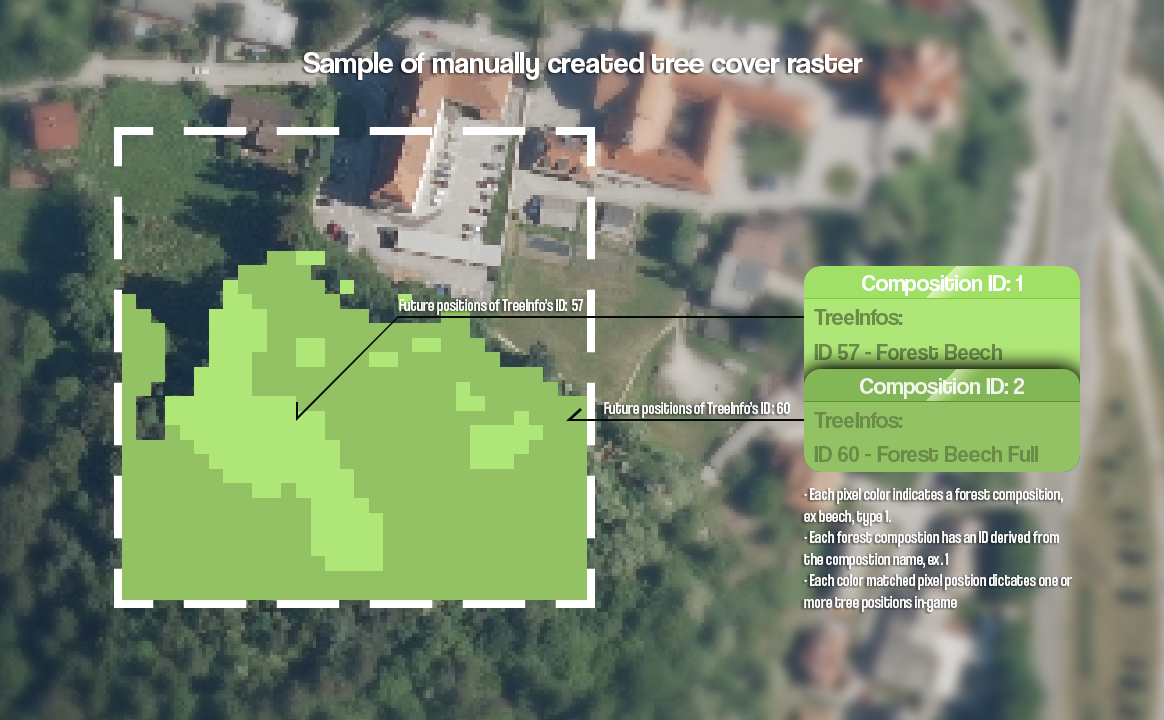
<style>
.page{position:relative;width:1164px;height:720px}
.page>*{position:absolute;margin:0}
.t1{font:30px "CoolveticaRg-Regular";color:#ffffff}
.t2{font:18px "CoolveticaCondensedRg-Regular";color:#ffffff}
.t3{font:18px "CoolveticaCondensedRg-Regular";letter-spacing:0.005em;color:#ffffff}
</style>
<div class="page">
<p class="t1" style="left:304px;top:52px;width:559px;height:28px">Sample of manually created tree cover raster</p>
<p class="t2" style="left:399px;top:299px;width:185px;height:16px">Future positions of TreeInfo’s ID:  57</p>
<p class="t2" style="left:604px;top:402px;width:186px;height:16px">Future positions of TreeInfo’s ID : 60</p>
<p class="t3" style="left:804px;top:488px;width:268px;height:124px">- Each pixel color indicates a forest composition, <br>ex beech, type 1. <br>- Each forest compostion has an ID derived from the compostion name, ex. 1<br>- Each color matched pixel postion dictates one or more tree positions in-game</p>
</div>
